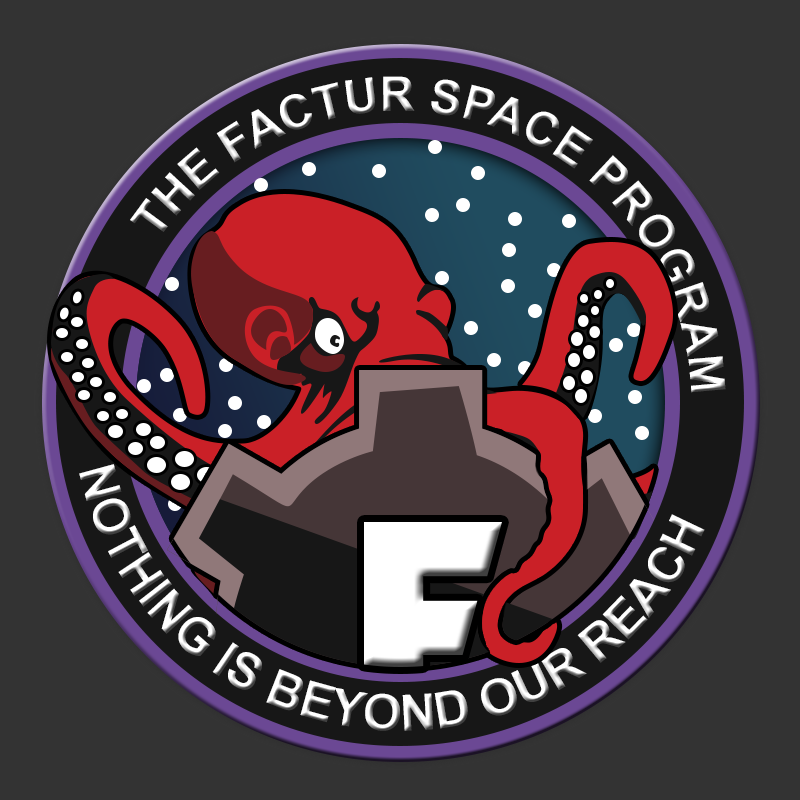
<style>
.page{position:relative;width:800px;height:800px;background:#333333}
.page>*{position:absolute;margin:0}
.t1{font:47.7px "Arial-BoldMT"}
.t2{font:50px "Arial-BoldMT"}
</style>
<div class="page">
<p class="t1" style="left:130px;top:76px;width:596px;height:317px;text-align:center">THE FACTUR SPACE PROGRAM</p>
<p class="t2" style="left:79px;top:464px;width:626px;height:267px;rotate:5deg">NOTHING IS BEYOND OUR REACH</p>
</div>
